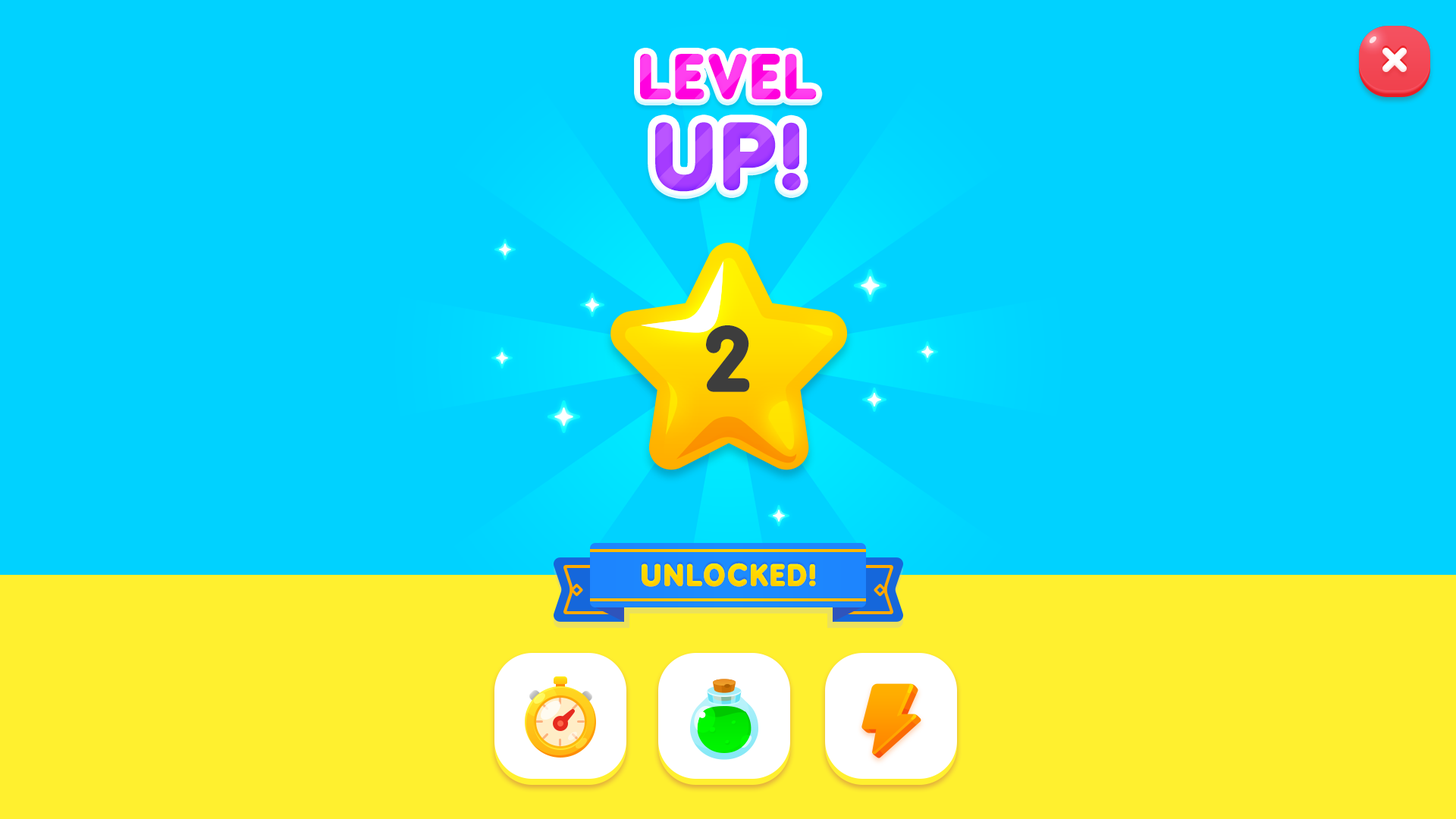
<style>
.page{position:relative;width:1456px;height:819px;background:#00d2ff}
.page>*{position:absolute;margin:0}
.t1{font:56.2px "BPreplay-Bold";letter-spacing:0.03em;font-weight:bold;scale:1.05 1}
.t2{font:84.3px "BPreplay-Bold";letter-spacing:0.03em;font-weight:bold;scale:1.05 1}
.t3{font:86.4px "BPreplay-Bold";color:#3d3d3d;scale:1.05 1}
.t4{font:27.4px "BPreplay-Bold";letter-spacing:0.03em;color:#ffcc00;text-transform:uppercase;font-weight:bold;scale:1.05 1}
</style>
<div class="page">
<p class="t1" style="left:640px;top:53px;width:177px;height:46px">LEVEL</p>
<p class="t2" style="left:655px;top:122px;width:146px;height:70px">UP!</p>
<p class="t3" style="left:706px;top:325px;width:44px;height:67px">2</p>
<p class="t4" style="left:642px;top:563px;width:174px;height:24px">Unlocked!</p>
</div>
